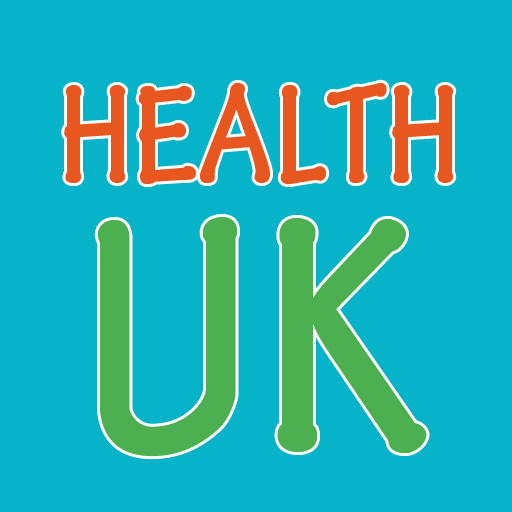
<style>
.page{position:relative;width:512px;height:512px;background:#06b3c8}
.page>*{position:absolute;margin:0}
.t1{font:150px "TektonPro-BoldCond";color:#e95721}
.t2{font:360px "TektonPro-BoldCond";color:#4caf50}
</style>
<div class="page">
<p class="t1" style="left:64px;top:82px;width:390px;height:102px">HEALTH</p>
<p class="t2" style="left:97px;top:217px;width:330px;height:240px">UK</p>
</div>
